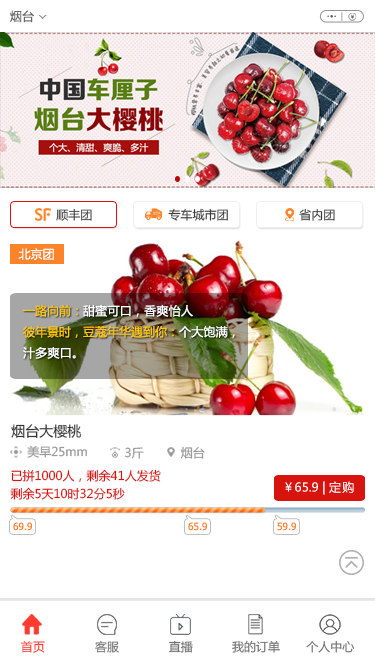
<style>
.page{position:relative;width:375px;height:667px;background:#ffffff}
.page>*{position:absolute;margin:0}
.t1{font:12px "MicrosoftYaHei";color:#666666}
.t2{font:12px "MicrosoftYaHei"}
.t3{font:12px "MicrosoftYaHei";color:#3a3a3a}
.t4{font:12px "MicrosoftYaHei";color:#ffffff}
.t5{font:12px "MicrosoftYaHei";letter-spacing:0.02em;color:#ffffff}
.t6{font:12px "MicrosoftYaHei";color:#ffc80b}
.t7{font:12px/14px "MicrosoftYaHei";letter-spacing:0.02em;color:#ffffff}
.t8{font:14px "MicrosoftYaHei";color:#333333}
.t9{font:12px "MicrosoftYaHei";color:#a4a3a3}
.t10{font:12px/18px "MicrosoftYaHei";color:#d7140d}
.t11{font:12px "MicrosoftYaHei";letter-spacing:0.1em;color:#ffffff}
.t12{font:10px "Tahoma";color:#fc8328}
.t13{font:12px "MicrosoftYaHei";color:#ff3b30}
.t14{font:12px "MicrosoftYaHei";color:#727272}
</style>
<div class="page">
<p class="t1" style="left:10px;top:10px;width:24px;height:13px">烟台</p>
<p class="t2" style="left:56px;top:208px;width:36px;height:13px">顺丰团</p>
<p class="t3" style="left:168px;top:208px;width:60px;height:13px">专车城市团</p>
<p class="t3" style="left:299px;top:208px;width:36px;height:13px">省内团</p>
<p class="t4" style="left:18px;top:248px;width:36px;height:12px">北京团</p>
<p class="t5" style="left:23px;top:304px;width:170px;height:13px"><span class="t6">一路向前：</span>甜蜜可口，香爽怡人</p>
<p class="t6" style="left:23px;top:325px;width:212px;height:34px">彼年景时，豆蔻年华遇到你：<span class="t7">个大饱满，<br>汁多爽口。</span></p>
<p class="t8" style="left:11px;top:424px;width:71px;height:14px">烟台大樱桃</p>
<p class="t9" style="left:27px;top:445px;width:60px;height:13px">美早25mm</p>
<p class="t9" style="left:125px;top:447px;width:19px;height:12px">3斤</p>
<p class="t9" style="left:180px;top:446px;width:25px;height:13px">烟台</p>
<p class="t10" style="left:10px;top:469px;width:151px;height:31px">已拼1000人，剩余41人发货<br>剩余5天10时32分5秒</p>
<p class="t4" style="left:285px;top:481px;width:69px;height:14px">￥65.9 | <span class="t11">定购</span></p>
<p class="t12" style="left:13px;top:522px;width:19px;height:9px">69.9</p>
<p class="t12" style="left:188px;top:522px;width:19px;height:9px">65.9</p>
<p class="t12" style="left:277px;top:522px;width:19px;height:9px">59.9</p>
<p class="t13" style="left:20px;top:641px;width:25px;height:12px">首页</p>
<p class="t14" style="left:95px;top:640px;width:24px;height:13px">客服</p>
<p class="t14" style="left:168px;top:640px;width:25px;height:13px">直播</p>
<p class="t14" style="left:232px;top:640px;width:48px;height:13px">我的订单</p>
<p class="t14" style="left:306px;top:640px;width:49px;height:13px">个人中心</p>
</div>
